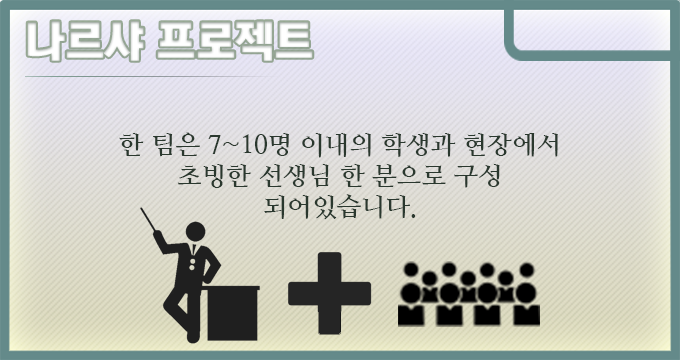
<style>
.page{position:relative;width:680px;height:360px}
.page>*{position:absolute;margin:0}
.t1{font:44px "KoreanTITGD5-R";letter-spacing:-0.01em;color:#ffffff}
.t2{font:26px "NanumMyeongjoBold";letter-spacing:-0.01em;color:#2a382e}
</style>
<div class="page">
<p class="t1" style="left:27px;top:21px;width:286px;height:40px">나르샤 프로젝트</p>
<p class="t2" style="left:119px;top:132px;width:439px;height:88px;text-align:center">한 팀은 7~10명 이내의 학생과 현장에서 초빙한 선생님 한 분으로 구성 되어있습니다.</p>
</div>
